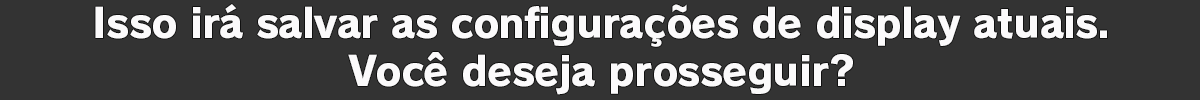
<style>
.page{position:relative;width:1200px;height:100px;background:#333333}
.page>*{position:absolute;margin:0}
.t1{font:40px "RodinPro-EB";letter-spacing:-0.018em;color:#fbfafb}
.t2{font:40px "RodinPro-EB";letter-spacing:-0.015em;color:#fbfafb}
</style>
<div class="page">
<p class="t1" style="left:95px;top:4px;width:1012px;height:43px">Isso irá salvar as configurações de display atuais.</p>
<p class="t2" style="left:348px;top:52px;width:505px;height:43px">Você deseja prosseguir?</p>
</div>
